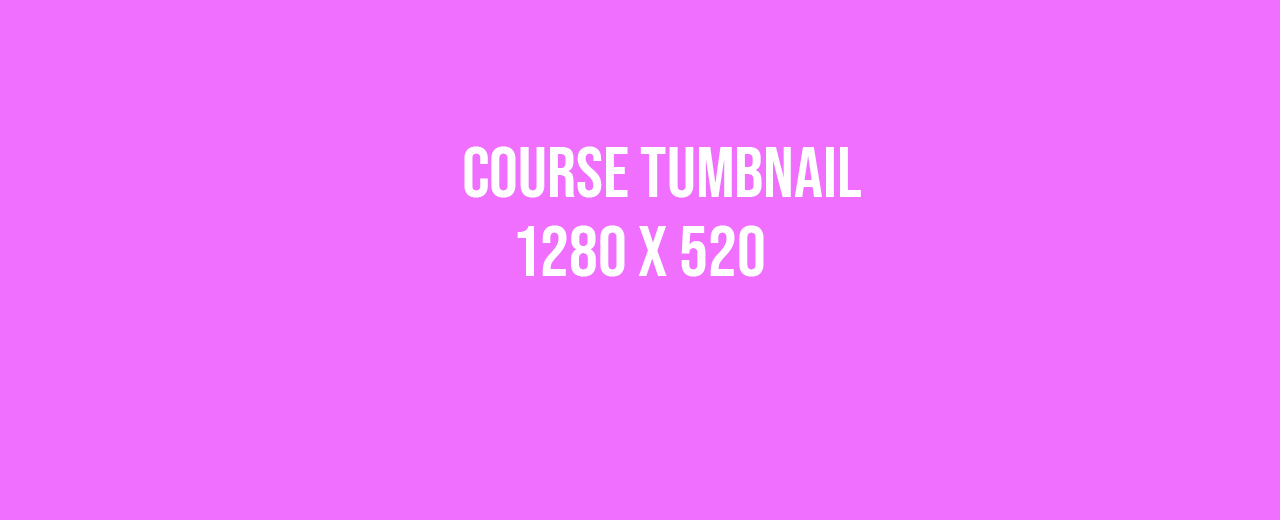
<style>
.page{position:relative;width:1280px;height:520px;background:#f06fff}
.page>*{position:absolute;margin:0}
.t1{font:72px "BebasNeue-Regular";color:#ffffff}
</style>
<div class="page">
<p class="t1" style="left:464px;top:146px;width:397px;height:52px">Course Tumbnail</p>
<p class="t1" style="left:517px;top:225px;width:247px;height:52px">1280 x 520</p>
</div>
